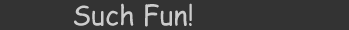
<style>
.page{position:relative;width:349px;height:30px;background:#333333}
.page>*{position:absolute;margin:0}
.t1{font:27.2px "ComicSansMS";color:#cccccc}
</style>
<div class="page">
<p class="t1" style="left:74px;top:3px;width:118px;height:24px">Such Fun!</p>
</div>
